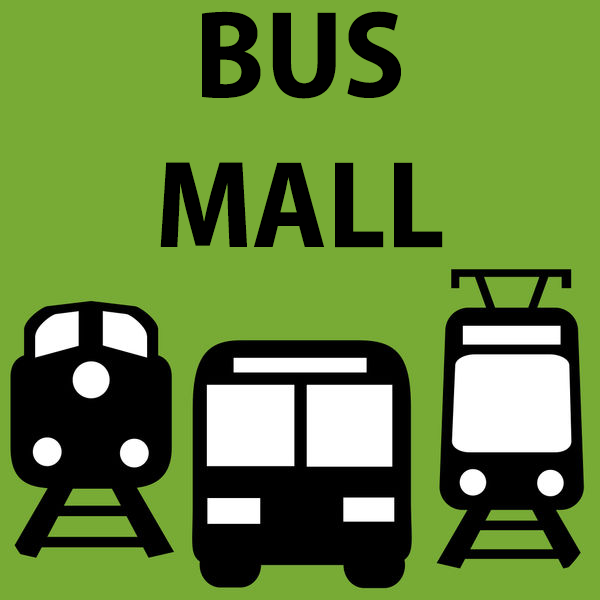
<style>
.page{position:relative;width:600px;height:600px;background:#78ab35}
.page>*{position:absolute;margin:0}
.t1{font:125px "MyriadPro-BoldSemiCn";color:#000000}
</style>
<div class="page">
<p class="t1" style="left:160px;top:11px;width:283px;height:237px;text-align:center">BUS<br>MALL</p>
</div>
